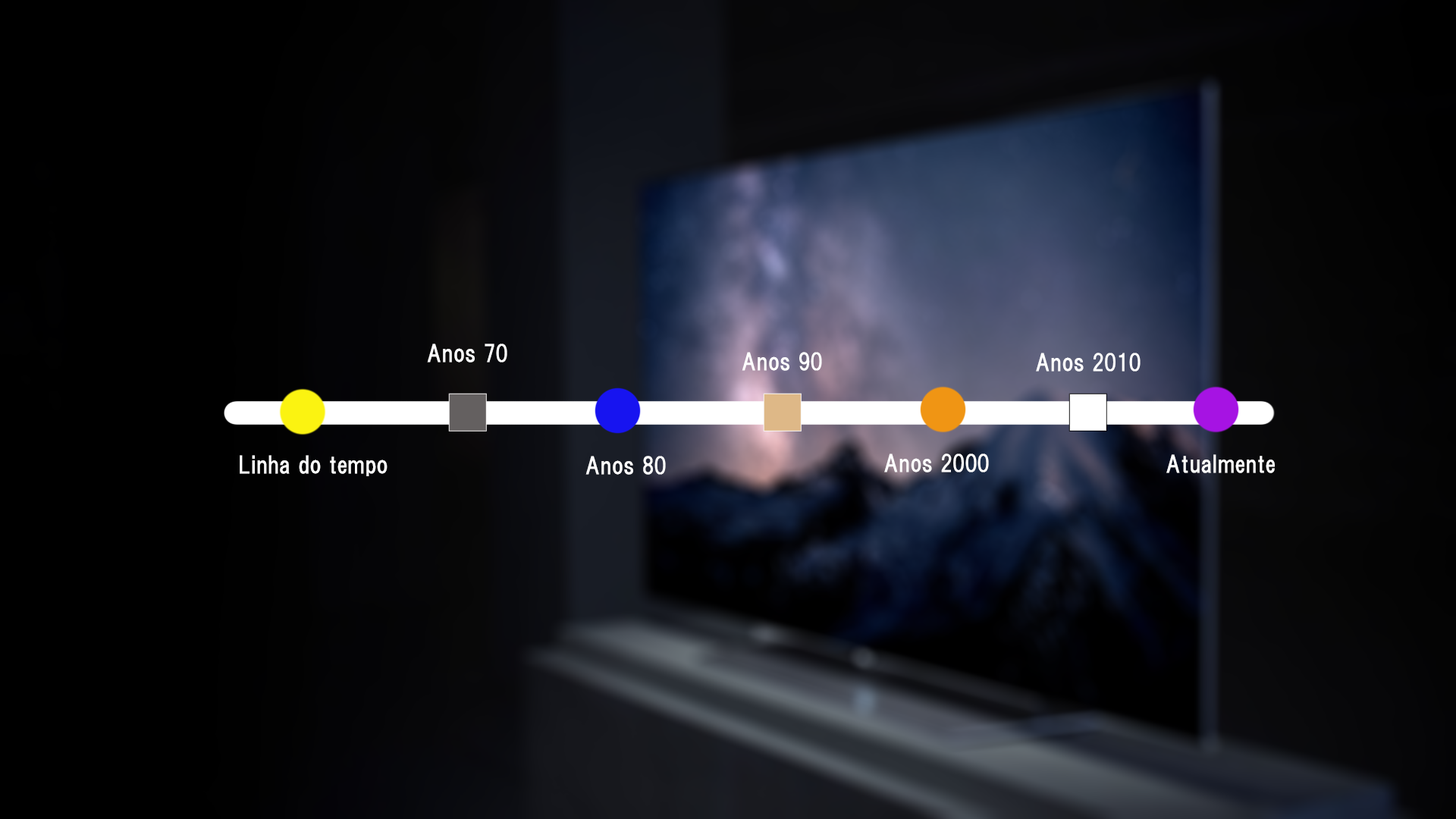
<style>
.page{position:relative;width:1456px;height:819px}
.page>*{position:absolute;margin:0}
.t1{font:22.7px "HGSGothicE";color:#ffffff}
.t2{font:303.3px "HGSGothicE";color:#deb887}
.t3{font:303.3px "HGSGothicE";color:#ffffff}
</style>
<div class="page">
<p class="t1" style="left:427px;top:344px;width:80px;height:18px">Anos 70</p>
<p class="t1" style="left:742px;top:352px;width:80px;height:19px">Anos 90</p>
<p class="t1" style="left:1036px;top:353px;width:105px;height:19px">Anos 2010</p>
<p class="t2" style="left:763px;top:393px;width:39px;height:38px">.</p>
<p class="t3" style="left:1068px;top:393px;width:39px;height:38px">.</p>
<p class="t1" style="left:240px;top:455px;width:148px;height:21px">Linha do tempo</p>
<p class="t1" style="left:585px;top:456px;width:81px;height:19px">Anos 80</p>
<p class="t1" style="left:884px;top:453px;width:105px;height:19px">Anos 2000</p>
<p class="t1" style="left:1166px;top:454px;width:109px;height:19px">Atualmente</p>
</div>
